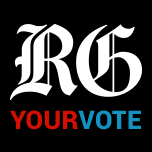
<style>
.page{position:relative;width:152px;height:152px;background:#000000}
.page>*{position:absolute;margin:0}
.t1{font:25.6px "Roboto-Black";letter-spacing:0.01em;color:#1393c0;text-transform:uppercase}
.t2{font:25.6px "Roboto-Black";letter-spacing:-0.005em;color:#d11001;text-transform:uppercase}
.t3{font:25.6px "Roboto-Black";letter-spacing:0.01em;color:#d11001;text-transform:uppercase}
</style>
<div class="page">
<p class="t1" style="left:10px;top:110px;width:131px;height:20px"><span class="t2">Y</span><span class="t3">our</span>Vote</p>
</div>
